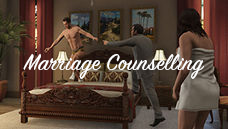
<style>
.page{position:relative;width:228px;height:129px}
.page>*{position:absolute;margin:0}
.t1{font:25px "SignPainter-HouseScript";letter-spacing:0.02em;color:#ffffff}
</style>
<div class="page">
<p class="t1" style="left:23px;top:54px;width:181px;height:25px">Marriage Counselling</p>
</div>
